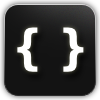
<style>
.page{position:relative;width:100px;height:100px;background:#131313}
.page>*{position:absolute;margin:0}
.t1{font:48px "DejaVuSansCondensed-Bold";color:#ffffff}
</style>
<div class="page">
<p class="t1" style="left:17px;top:27px;width:67px;height:45px">{ }</p>
</div>
